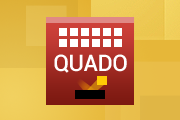
<style>
.page{position:relative;width:180px;height:120px}
.page>*{position:absolute;margin:0}
.t1{font:22.7px "Roboto-Medium";letter-spacing:-0.02em;color:#ffffff}
</style>
<div class="page">
<p class="t1" style="left:54px;top:54px;width:73px;height:19px">QUADO</p>
</div>
